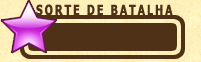
<style>
.page{position:relative;width:201px;height:62px;background:#4f3117}
.page>*{position:absolute;margin:0}
.t1{font:14px "Tahoma-Bold";letter-spacing:0.2em;color:#4f3117;scale:0.75 1}
</style>
<div class="page">
<p class="t1" style="left:36px;top:4px;width:137px;height:12px">SORTE DE BATALHA</p>
</div>
